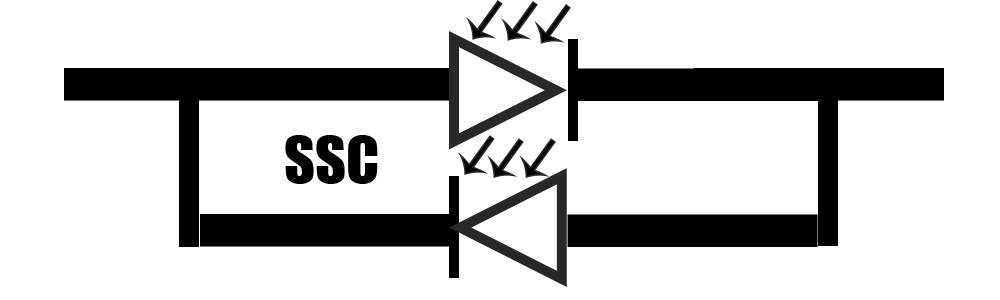
<style>
.page{position:relative;width:1000px;height:300px;background:#ffffff}
.page>*{position:absolute;margin:0}
.t1{font:60px "Impact";color:#000000}
</style>
<div class="page">
<p class="t1" style="left:285px;top:135px;width:93px;height:49px">SSC</p>
</div>
